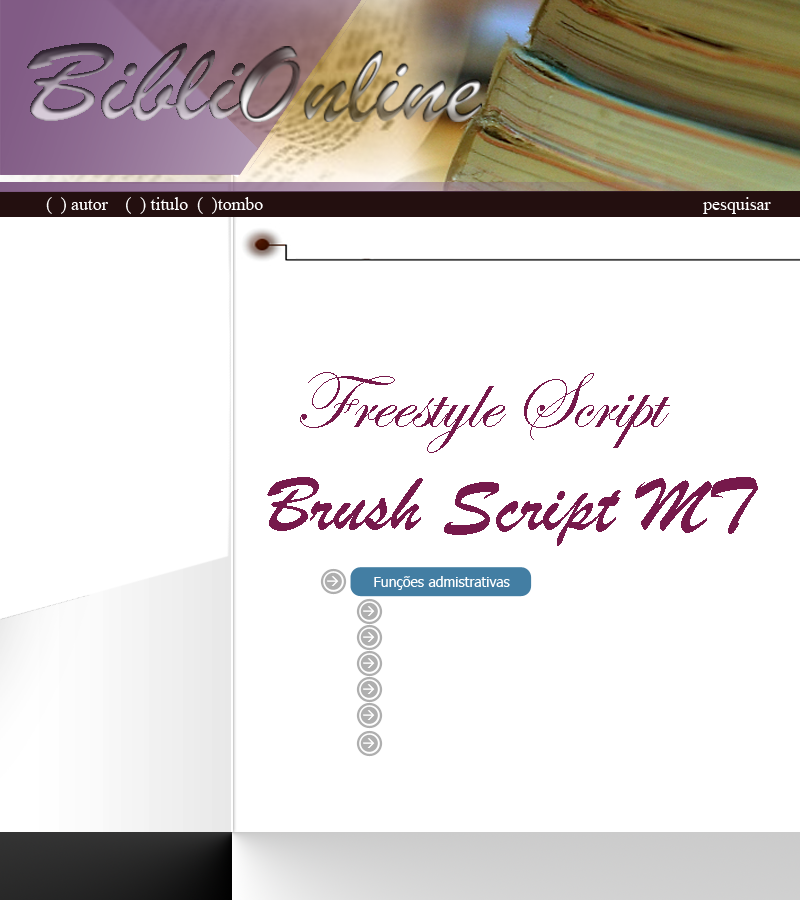
<style>
.page{position:relative;width:800px;height:900px;background:#ffffff}
.page>*{position:absolute;margin:0}
.t1{font:17.8px "TimesNewRomanPSMT";color:#ffffff}
.t2{font:81.3px "EdwardianScriptITC";color:#76194b}
.t3{font:81.3px "BrushScriptMT";color:#76194b}
.t4{font:14px "Tahoma";color:#ffffff}
</style>
<div class="page">
<p class="t1" style="left:46px;top:197px;width:725px;height:17px">(  ) autor    (  ) titulo  (  )tombo                                                                                                   pesquisar</p>
<p class="t2" style="left:300px;top:372px;width:370px;height:81px">Freestyle Script</p>
<p class="t3" style="left:267px;top:477px;width:491px;height:69px">Brush Script MT</p>
<p class="t4" style="left:374px;top:576px;width:136px;height:14px">Funções admistrativas</p>
</div>
